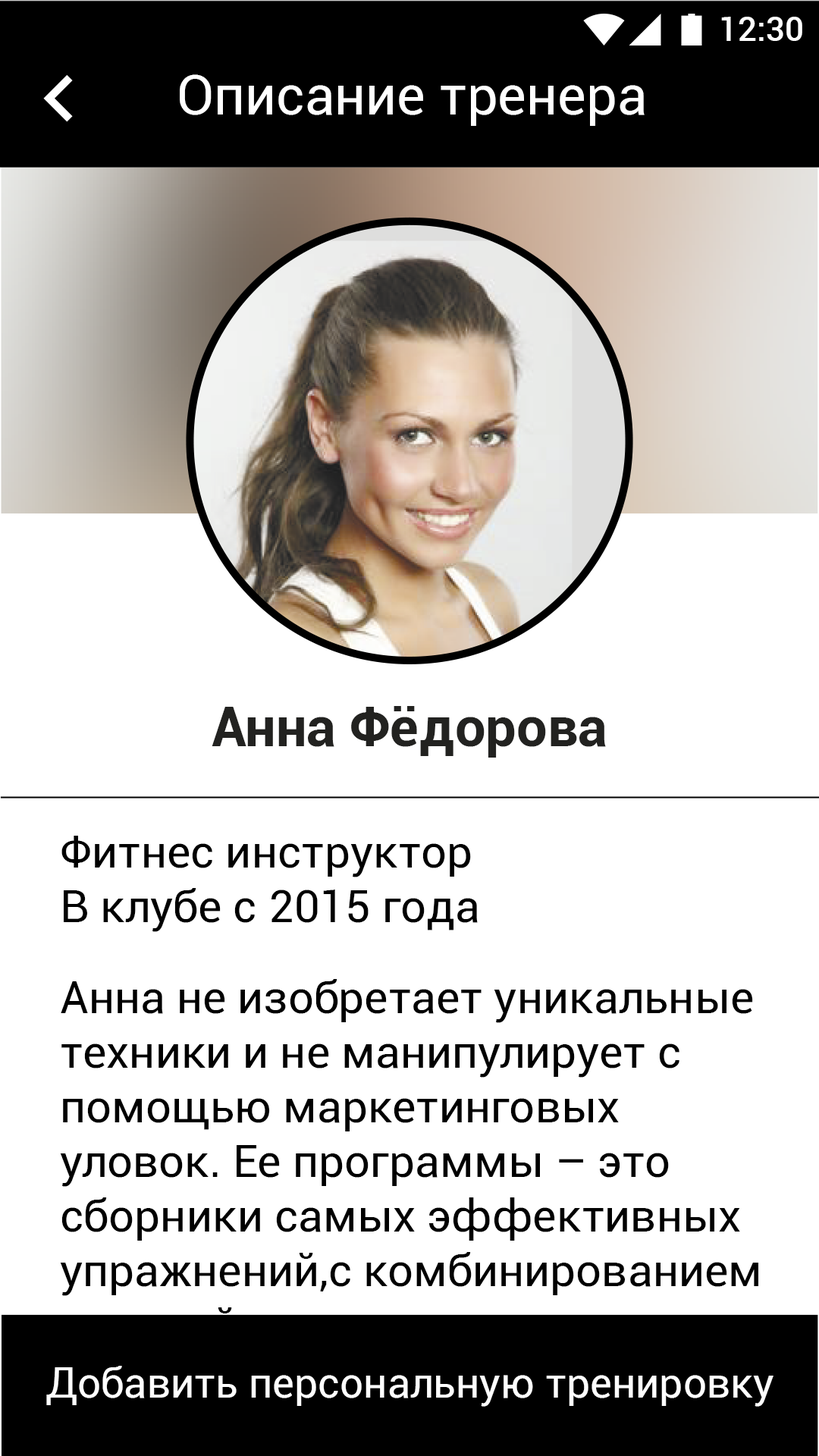
<style>
.page{position:relative;width:819px;height:1456px;background:#ffffff}
.page>*{position:absolute;margin:0}
.t1{font:33.4px "Roboto-Medium";color:#ffffff}
.t2{font:54.6px "Roboto-Regular";color:#ffffff}
.t3{font:54.6px "Roboto-Bold";color:#222220}
.t4{font:45.5px "Roboto-Regular";color:#000000}
.t5{font:41.7px "Roboto-Regular";color:#ffffff}
</style>
<div class="page">
<p class="t1" style="left:721px;top:17px;width:81px;height:24px">12:30</p>
<p class="t2" style="left:180px;top:74px;width:465px;height:52px">Описание тренера</p>
<p class="t3" style="left:212px;top:706px;width:394px;height:52px">Анна Фёдорова</p>
<p class="t4" style="left:60px;top:836px;width:698px;height:505px">Фитнес инструктор<br>В клубе с 2015 года<br><br>Анна не изобретает уникальные<br>техники и не манипулирует с <br>помощью маркетинговых <br>уловок. Ее программы – это <br>сборники самых эффективных <br>упражнений,с комбинированием <br>силовой и</p>
<p class="t5" style="left:46px;top:1366px;width:727px;height:41px">Добавить персональную тренировку</p>
</div>
